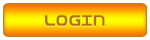
<style>
.page{position:relative;width:150px;height:40px}
.page>*{position:absolute;margin:0}
.t1{font:17.7px "FederalService";color:#b96d09;scale:0.94 1}
</style>
<div class="page">
<p class="t1" style="left:45px;top:15px;width:60px;height:11px">LOGIN</p>
</div>
